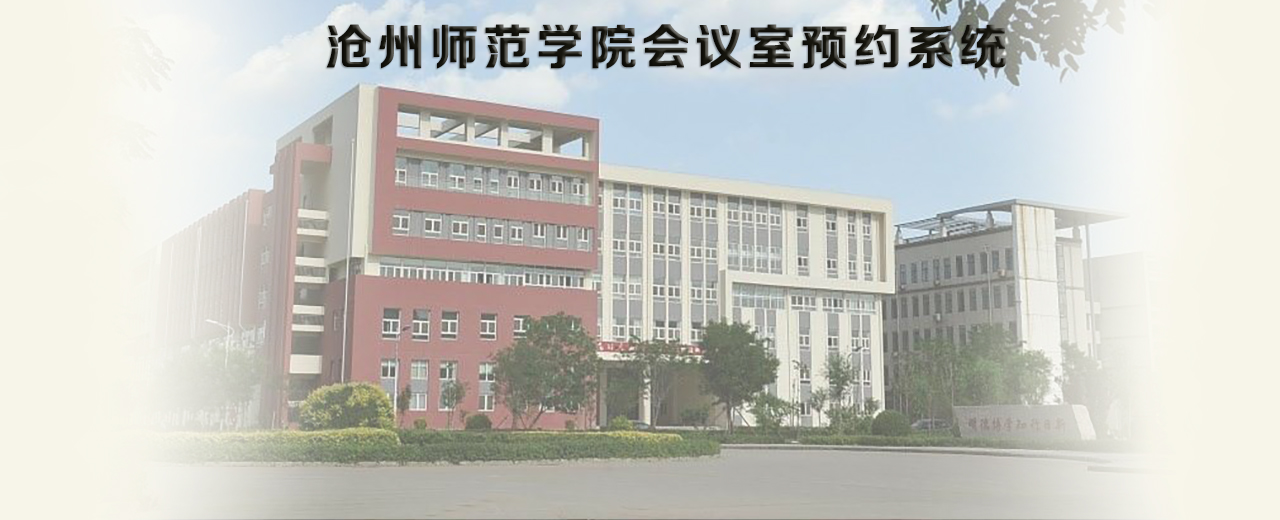
<style>
.page{position:relative;width:1280px;height:520px}
.page>*{position:absolute;margin:0}
.t1{font:48px "FZZCHJW--GB1-0";letter-spacing:0.075em;color:#16150d;font-weight:bold}
</style>
<div class="page">
<p class="t1" style="left:326px;top:24px;width:680px;height:45px">沧州师范学院会议室预约系统</p>
</div>
